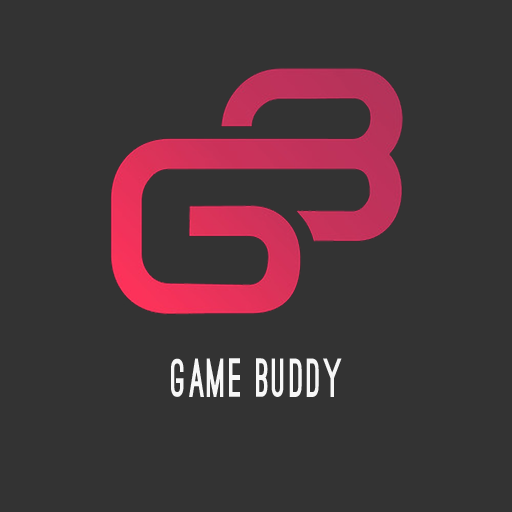
<style>
.page{position:relative;width:512px;height:512px;background:#333333}
.page>*{position:absolute;margin:0}
.t1{font:74.5px "OstrichSans-Black";letter-spacing:0.08em;color:#f7f7f7;font-variant:small-caps;scale:0.69 1}
</style>
<div class="page">
<p class="t1" style="left:171px;top:358px;width:171px;height:39px">game buddy</p>
</div>
